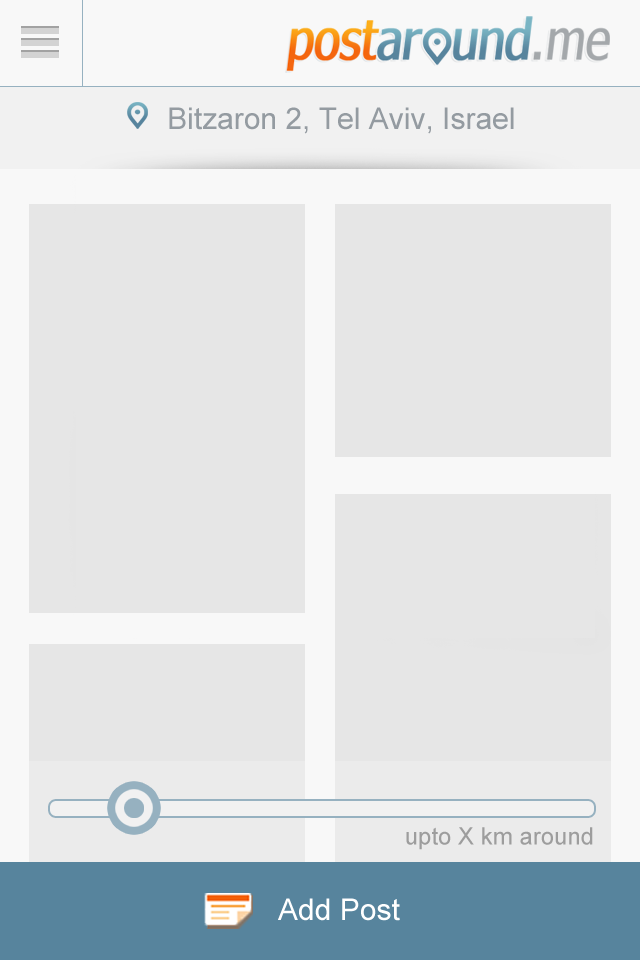
<style>
.page{position:relative;width:640px;height:960px;background:#e6e6e6}
.page>*{position:absolute;margin:0}
.t1{font:30px "ArialMT";color:#949ba1}
.t2{font:24px "ArialMT";color:#9d9d9d}
.t3{font:30px "ArialMT";color:#ffffff}
</style>
<div class="page">
<p class="t1" style="left:169px;top:107px;width:345px;height:27px">Bitzaron 2, Tel Aviv, Israel</p>
<p class="t2" style="left:406px;top:827px;width:187px;height:23px">upto X km around</p>
<p class="t3" style="left:278px;top:898px;width:122px;height:23px">Add Post</p>
</div>
